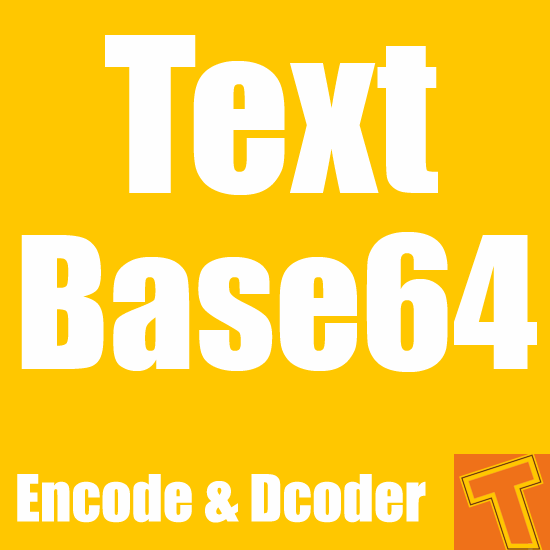
<style>
.page{position:relative;width:550px;height:550px;background:#ffc700}
.page>*{position:absolute;margin:0}
.t1{font:200px "Impact";color:#fefefe}
.t2{font:170px "Impact";color:#fefefe}
.t3{font:60px "Impact";color:#fefefe}
</style>
<div class="page">
<p class="t1" style="left:105px;top:35px;width:333px;height:160px">Text</p>
<p class="t2" style="left:21px;top:232px;width:516px;height:140px">Base64</p>
<p class="t3" style="left:17px;top:474px;width:409px;height:49px">Encode &amp; Dcoder</p>
</div>
